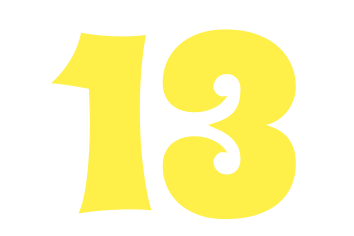
<style>
.page{position:relative;width:354px;height:236px;background:#ffffff}
.page>*{position:absolute;margin:0}
.t1{font:250px "SpicyRice-Regular";color:#ffef49}
</style>
<div class="page">
<p class="t1" style="left:51px;top:29px;width:245px;height:191px">13</p>
</div>
